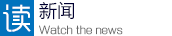
<style>
.page{position:relative;width:172px;height:36px;background:#ffffff}
.page>*{position:absolute;margin:0}
.t1{font:30px "RTWSYueGoTrial-Regular";letter-spacing:0.015em;color:#ffffff}
.t2{font:18px "MicrosoftYaHei";letter-spacing:0.015em;color:#000033}
.t3{font:11px "GJJXQJW--GB1-0";letter-spacing:0.025em;color:#666666}
</style>
<div class="page">
<p class="t1" style="left:3px;top:4px;width:28px;height:28px">读</p>
<p class="t2" style="left:39px;top:1px;width:35px;height:19px">新闻</p>
<p class="t3" style="left:39px;top:25px;width:84px;height:10px">Watch the news</p>
</div>
